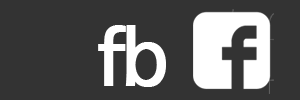
<style>
.page{position:relative;width:300px;height:100px;background:#333333}
.page>*{position:absolute;margin:0}
.t1{font:76.4px "Thonburi";letter-spacing:-0.075em;color:#ffffff;font-weight:bold}
</style>
<div class="page">
<p class="t1" style="left:98px;top:25px;width:68px;height:62px">fb</p>
</div>
